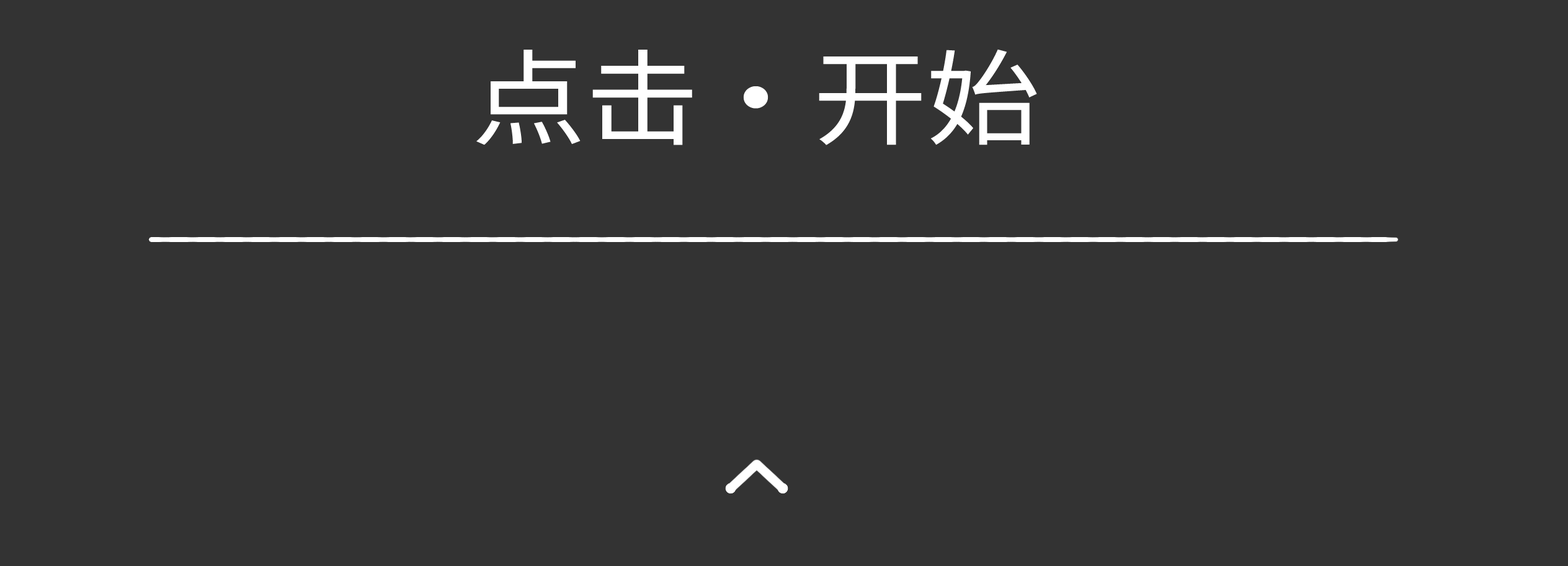
<style>
.page{position:relative;width:1568px;height:566px;background:#333333}
.page>*{position:absolute;margin:0}
.t1{font:103.4px "SourceHanSansCNVF-Regular";color:#ffffff;scale:1.1 1}
</style>
<div class="page">
<p class="t1" style="left:476px;top:49px;width:561px;height:96px">点击·开始</p>
</div>
